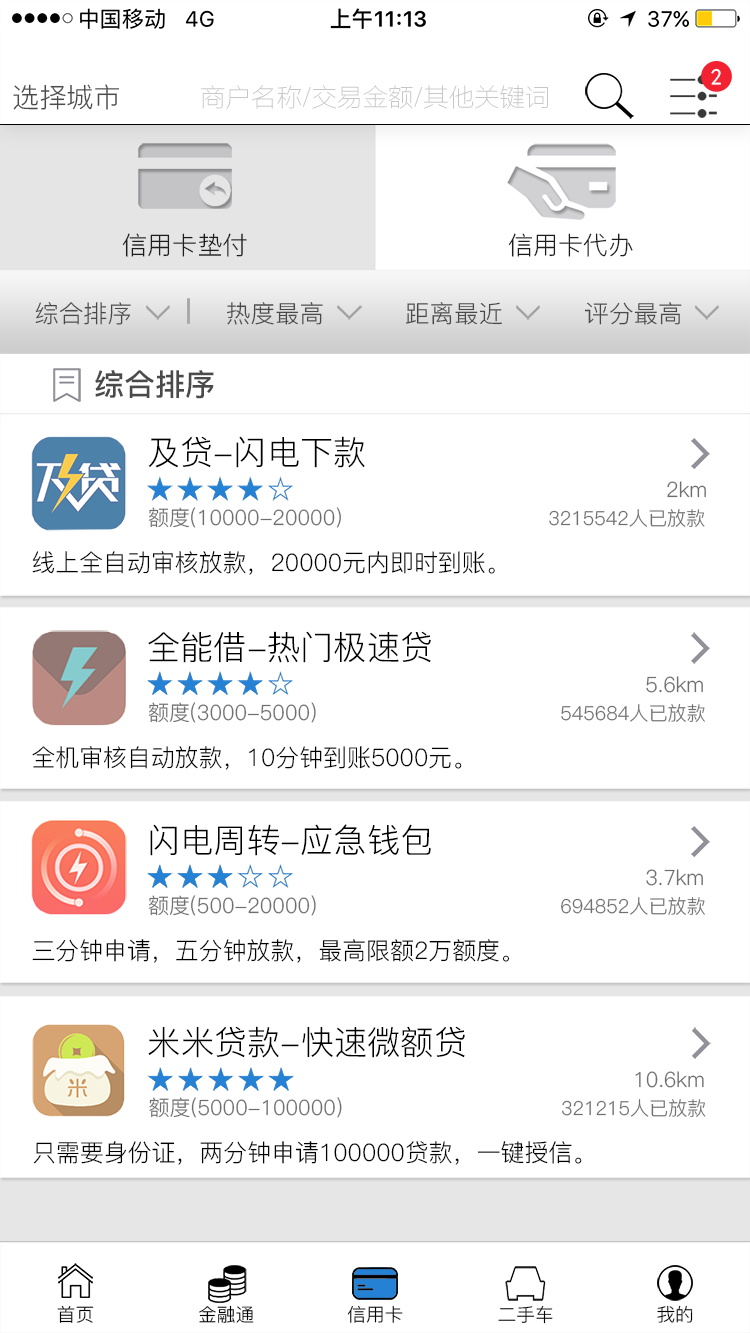
<style>
.page{position:relative;width:750px;height:1333px;background:#ffffff}
.page>*{position:absolute;margin:0}
.t1{font:22.8px "SimHei";color:#ffffff}
.t2{font:27.2px "PingFang-SC-Regular";color:#4c4c4c}
.t3{font:25.5px "FZLTCXHJW--GB1-0";color:#c7c7c7}
.t4{font:25px "PingFang-SC-Regular";color:#1d1d1d}
.t5{font:24.1px "PingFang-SC-Regular";color:#4a4a4a}
.t6{font:30.2px "PingFang-SC-Bold";color:#4a4a4a}
.t7{font:33.2px "PingFang-SC-Regular";color:#000000}
.t8{font:21.1px "PingFang-SC-Regular";color:#6f6f6f}
.t9{font:19.3px "PingFang-SC-Regular";color:#6f6f6f}
.t10{font:24.1px "PingFang-SC-Regular";color:#000000}
.t11{font:18.4px "PingFang-SC-Regular";color:#000000}
</style>
<div class="page">
<p class="t1" style="left:711px;top:68px;width:10px;height:17px">2</p>
<p class="t2" style="left:13px;top:84px;width:106px;height:26px">选择城市</p>
<p class="t3" style="left:201px;top:85px;width:347px;height:24px">商户名称/交易金额/其他关键词</p>
<p class="t4" style="left:122px;top:233px;width:125px;height:24px">信用卡垫付</p>
<p class="t4" style="left:508px;top:233px;width:125px;height:24px">信用卡代办</p>
<p class="t5" style="left:35px;top:302px;width:96px;height:23px">综合排序</p>
<p class="t5" style="left:227px;top:302px;width:96px;height:23px">热度最高</p>
<p class="t5" style="left:406px;top:302px;width:96px;height:23px">距离最近</p>
<p class="t5" style="left:584px;top:302px;width:98px;height:23px">评分最高</p>
<p class="t6" style="left:95px;top:370px;width:119px;height:29px">综合排序</p>
<p class="t7" style="left:148px;top:436px;width:217px;height:32px">及贷-闪电下款</p>
<p class="t8" style="left:667px;top:481px;width:39px;height:17px">2km</p>
<p class="t8" style="left:148px;top:507px;width:193px;height:21px">额度(10000-20000)</p>
<p class="t9" style="left:549px;top:508px;width:156px;height:19px">3215542人已放款</p>
<p class="t10" style="left:32px;top:551px;width:463px;height:24px">线上全自动审核放款，20000元内即时到账。</p>
<p class="t7" style="left:148px;top:631px;width:283px;height:32px">全能借-热门极速贷</p>
<p class="t8" style="left:646px;top:676px;width:57px;height:17px">5.6km</p>
<p class="t8" style="left:148px;top:702px;width:168px;height:21px">额度(3000-5000)</p>
<p class="t9" style="left:561px;top:703px;width:144px;height:19px">545684人已放款</p>
<p class="t10" style="left:32px;top:746px;width:430px;height:24px">全机审核自动放款，10分钟到账5000元。</p>
<p class="t7" style="left:150px;top:824px;width:281px;height:32px">闪电周转-应急钱包</p>
<p class="t8" style="left:646px;top:869px;width:57px;height:17px">3.7km</p>
<p class="t8" style="left:148px;top:895px;width:168px;height:21px">额度(500-20000)</p>
<p class="t9" style="left:561px;top:896px;width:144px;height:19px">694852人已放款</p>
<p class="t10" style="left:32px;top:939px;width:478px;height:24px">三分钟申请，五分钟放款，最高限额2万额度。</p>
<p class="t7" style="left:148px;top:1026px;width:317px;height:32px">米米贷款-快速微额贷</p>
<p class="t8" style="left:635px;top:1071px;width:69px;height:17px">10.6km</p>
<p class="t8" style="left:149px;top:1097px;width:193px;height:21px">额度(5000-100000)</p>
<p class="t9" style="left:562px;top:1099px;width:144px;height:18px">321215人已放款</p>
<p class="t10" style="left:33px;top:1141px;width:549px;height:24px">只需要身份证，两分钟申请100000贷款，一键授信。</p>
<p class="t11" style="left:57px;top:1305px;width:37px;height:18px">首页</p>
<p class="t11" style="left:199px;top:1305px;width:55px;height:18px">金融通</p>
<p class="t11" style="left:347px;top:1305px;width:56px;height:18px">信用卡</p>
<p class="t11" style="left:498px;top:1305px;width:55px;height:19px">二手车</p>
<p class="t11" style="left:657px;top:1305px;width:36px;height:18px">我的</p>
</div>
